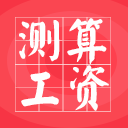
<style>
.page{position:relative;width:128px;height:128px;background:#fa4651}
.page>*{position:absolute;margin:0}
.t1{font:48px/46.7px "YankaigungEG-Ultra-GB";letter-spacing:0.003em;color:#fefefe}
</style>
<div class="page">
<p class="t1" style="left:15px;top:17px;width:96px;height:95px">测算<br>工资</p>
</div>
